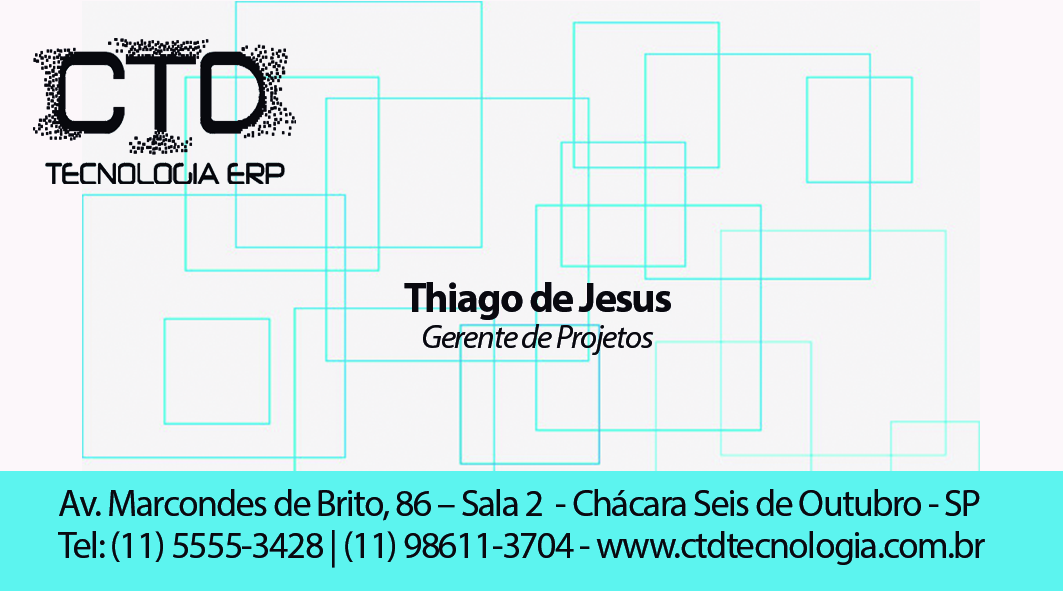
<style>
.page{position:relative;width:1063px;height:591px;background:#f6f5f6}
.page>*{position:absolute;margin:0}
.t1{font:41.7px "MyriadPro-Bold";letter-spacing:-0.04em;color:#090910}
.t2{font:33.3px "MyriadPro-It";letter-spacing:-0.04em;color:#090910}
.t3{font:37.5px/41.7px "MyriadPro-Regular";letter-spacing:-0.04em;color:#090910}
</style>
<div class="page">
<p class="t1" style="left:404px;top:282px;width:267px;height:38px">Thiago de Jesus</p>
<p class="t2" style="left:423px;top:324px;width:231px;height:31px">Gerente de Projetos</p>
<p class="t3" style="left:58px;top:489px;width:927px;height:79px">Av. Marcondes de Brito, 86 – Sala 2  - Chácara Seis de Outubro - SP<br>Tel: (11) 5555-3428 | (11) 98611-3704 - www.ctdtecnologia.com.br</p>
</div>
